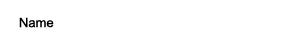
<style>
.page{position:relative;width:305px;height:45px;background:#ffffff}
.page>*{position:absolute;margin:0}
.t1{font:13px "ArialMT";color:#000000}
</style>
<div class="page">
<p class="t1" style="left:19px;top:17px;width:35px;height:11px">Name</p>
</div>
